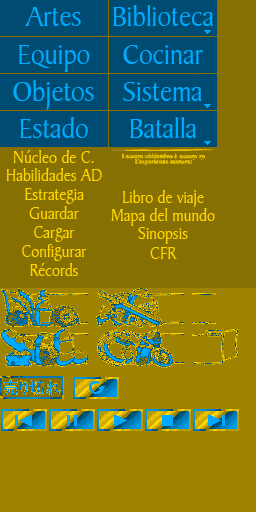
<style>
.page{position:relative;width:256px;height:512px;background:#867001}
.page>*{position:absolute;margin:0}
.t1{font:30.3px/37.3px "BakerSignetBT-Roman";color:#00aaff;scale:0.93 1}
.t2{font:18.9px/18.9px "BakerSignetBT-Roman";color:#ffd500;scale:0.88 1}
</style>
<div class="page">
<p class="t1" style="left:113px;top:5px;width:100px;height:133px;text-align:center">Biblioteca<br>Cocinar<br>Sistema<br>Batalla</p>
<p class="t1" style="left:13px;top:7px;width:81px;height:131px;text-align:center">Artes<br>Equipo<br>Objetos<br>Estado</p>
<p class="t2" style="left:6px;top:150px;width:96px;height:126px;text-align:center">Núcleo de C.<br>Habilidades AD<br>Estrategia<br>Guardar<br>Cargar<br>Configurar<br>Récords</p>
<p class="t2" style="left:111px;top:190px;width:104px;height:69px;text-align:center">Libro de viaje<br>Mapa del mundo<br>Sinopsis<br>CFR</p>
</div>
